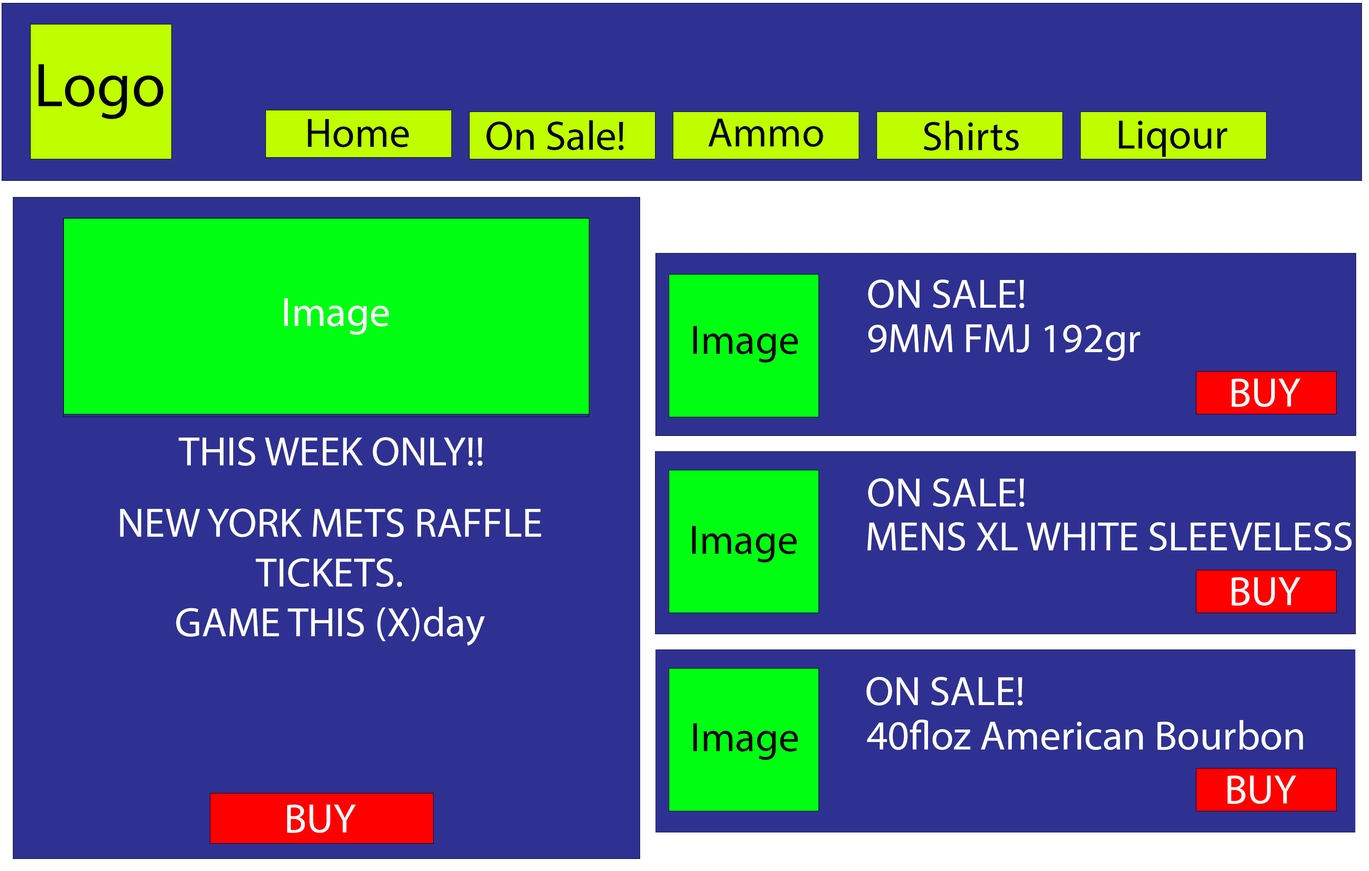
<style>
.page{position:relative;width:1369px;height:871px;background:#2e3192}
.page>*{position:absolute;margin:0}
.t1{font:62.2px "MyriadPro-Regular";color:#000000}
.t2{font:41.5px "MyriadPro-Regular";color:#000000}
.t3{font:41.5px "MyriadPro-Regular";color:#ffffff}
</style>
<div class="page">
<p class="t1" style="left:39px;top:64px;width:124px;height:55px">Logo</p>
<p class="t2" style="left:308px;top:119px;width:101px;height:28px">Home</p>
<p class="t2" style="left:486px;top:120px;width:137px;height:30px">On Sale!</p>
<p class="t2" style="left:708px;top:119px;width:115px;height:28px">Ammo</p>
<p class="t2" style="left:923px;top:121px;width:96px;height:30px">Shirts</p>
<p class="t2" style="left:1119px;top:121px;width:108px;height:36px">Liqour</p>
<p class="t3" style="left:868px;top:280px;width:156px;height:28px">ON SALE!</p>
<p class="t3" style="left:284px;top:298px;width:105px;height:37px">Image</p>
<p class="t2" style="left:693px;top:326px;width:105px;height:37px">Image</p>
<p class="t3" style="left:868px;top:324px;width:272px;height:37px">9MM FMJ 192gr</p>
<p class="t3" style="left:1232px;top:379px;width:68px;height:28px">BUY</p>
<p class="t3" style="left:178px;top:437px;width:304px;height:29px">THIS WEEK ONLY!!</p>
<p class="t3" style="left:868px;top:478px;width:156px;height:29px">ON SALE!</p>
<p class="t3" style="left:120px;top:509px;width:421px;height:137px;text-align:center">NEW YORK METS RAFFLE<br>TICKETS.<br>GAME THIS (X)day</p>
<p class="t2" style="left:692px;top:526px;width:105px;height:36px">Image</p>
<p class="t3" style="left:867px;top:522px;width:484px;height:29px">MENS XL WHITE SLEEVELESS</p>
<p class="t3" style="left:1232px;top:577px;width:68px;height:29px">BUY</p>
<p class="t3" style="left:866px;top:677px;width:157px;height:29px">ON SALE!</p>
<p class="t2" style="left:693px;top:723px;width:105px;height:37px">Image</p>
<p class="t3" style="left:867px;top:720px;width:436px;height:30px">40floz American Bourbon</p>
<p class="t3" style="left:1227px;top:776px;width:69px;height:28px">BUY</p>
<p class="t3" style="left:287px;top:805px;width:69px;height:28px">BUY</p>
</div>
